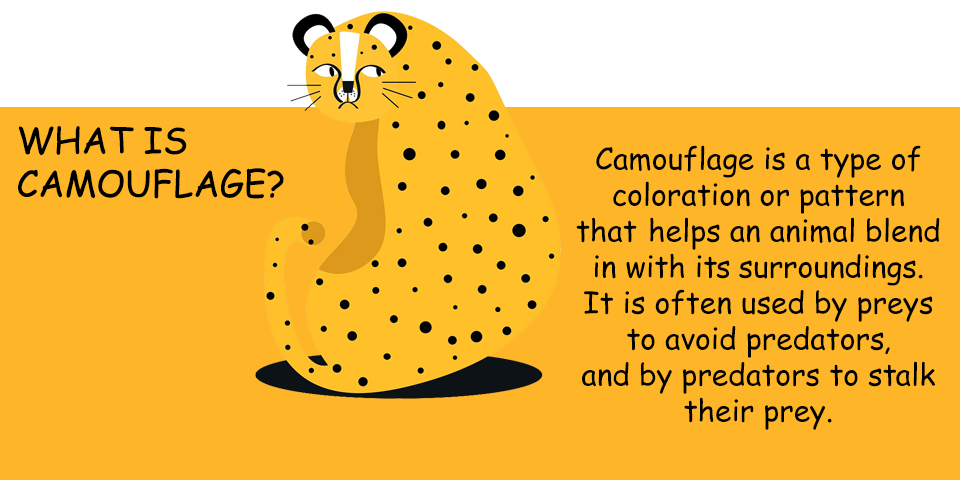
<style>
.page{position:relative;width:960px;height:480px;background:#feb628}
.page>*{position:absolute;margin:0}
.t1{font:36px "ComicSansMS";color:#000000}
.t2{font:30px "ComicSansMS";color:#000000}
</style>
<div class="page">
<p class="t1" style="left:18px;top:126px;width:266px;height:73px">WHAT IS<br>CAMOUFLAGE?</p>
<p class="t2" style="left:576px;top:145px;width:364px;height:285px;text-align:center">Camouflage is a type of<br>coloration or pattern<br>that helps an animal blend<br>in with its surroundings.<br>It is often used by preys<br>to avoid predators,<br>and by predators to stalk<br>their prey.</p>
</div>
